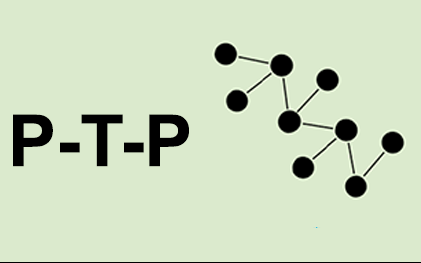
<style>
.page{position:relative;width:421px;height:263px;background:#dbeacd}
.page>*{position:absolute;margin:0}
.t1{font:72.1px "Arial-BoldMT";color:#000000}
</style>
<div class="page">
<p class="t1" style="left:13px;top:114px;width:176px;height:53px">P-T-P</p>
</div>
